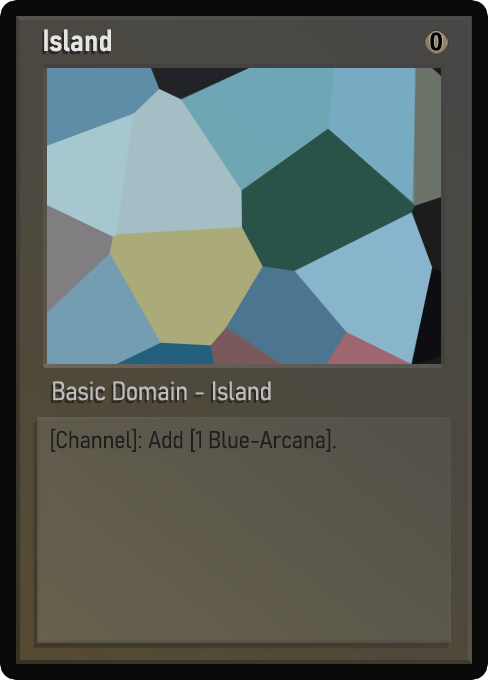
<style>
.page{position:relative;width:488px;height:680px}
.page>*{position:absolute;margin:0}
.t1{font:30px "Bahnschrift-SemiBoldSemiCondensed";color:#f2f2f2;font-weight:bold}
.t2{font:25px "WTRRoycroft";color:#000000;font-weight:bold;scale:1.09 1}
.t3{font:26px "Bahnschrift-LightSemiCondensed";color:#c8c8c8;font-weight:bold}
.t4{font:24px "Bahnschrift-LightSemiCondensed";color:#1e1e1e;font-weight:bold}
</style>
<div class="page">
<p class="t1" style="left:44px;top:29px;width:67px;height:23px;opacity:0.9">Island</p>
<p class="t2" style="left:430px;top:32px;width:12px;height:19px">0</p>
<p class="t3" style="left:53px;top:381px;width:218px;height:20px;opacity:0.9">Basic Domain - Island</p>
<p class="t4" style="left:51px;top:428px;width:285px;height:24px">[Channel]: Add [1 Blue-Arcana].</p>
</div>
